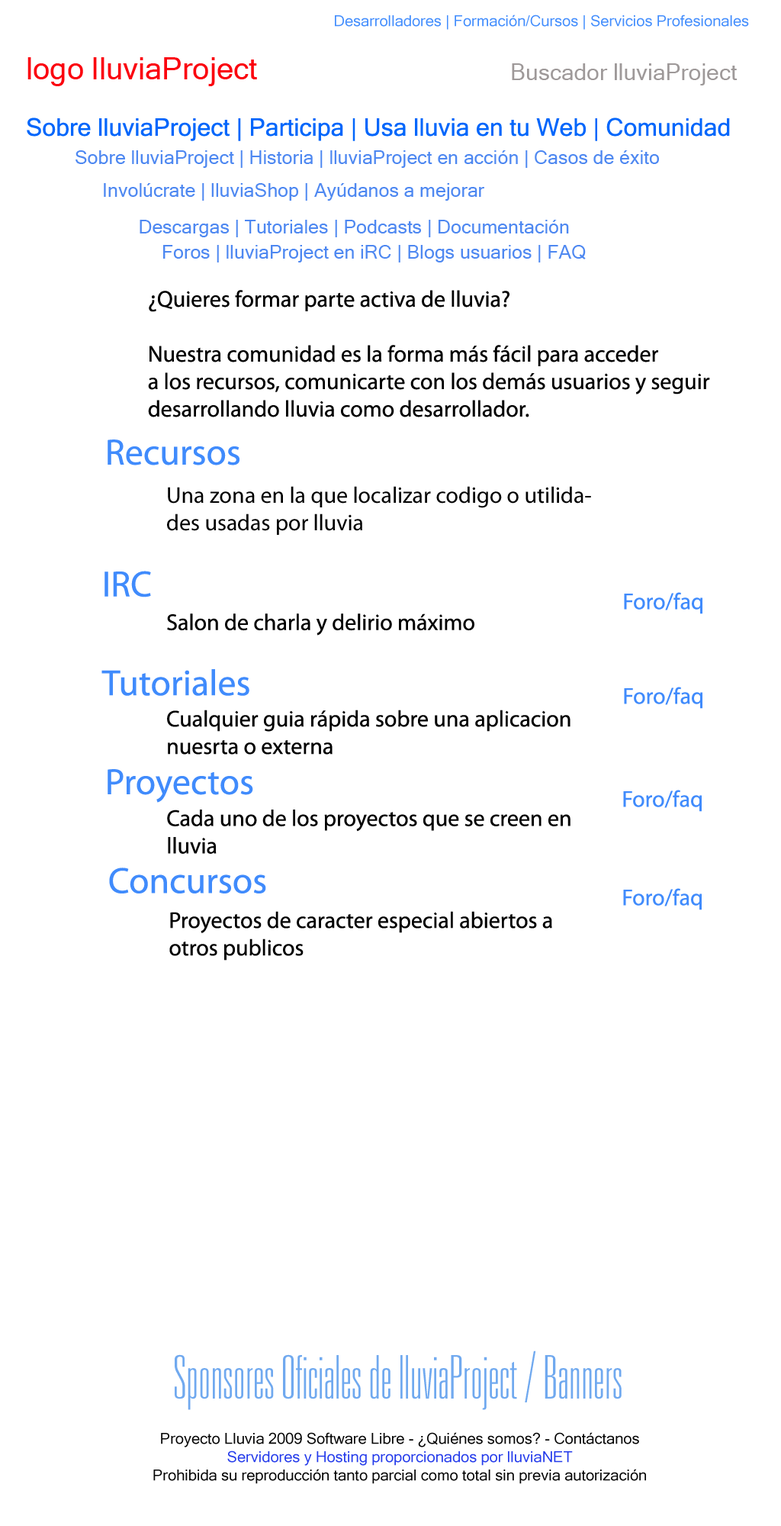
<style>
.page{position:relative;width:781px;height:1526px;background:#ffffff}
.page>*{position:absolute;margin:0}
.t1{font:15.3px "MicrosoftSansSerif";color:#428dfd}
.t2{font:30.5px "MicrosoftSansSerif";color:#fb020e}
.t3{font:22.9px "MicrosoftSansSerif";color:#9e9999}
.t4{font:24.4px "MicrosoftSansSerif";color:#0266fb}
.t5{font:19.1px "MicrosoftSansSerif";color:#4e88f1}
.t6{font:22.9px "MyriadPro-Regular";color:#000000}
.t7{font:36.6px "MyriadPro-Regular";color:#408bfc}
.t8{font:60.3px "Univers-ThinUltraCondensed";color:#70a9ef}
.t9{font:15.3px "MicrosoftSansSerif";color:#040404}
.t10{font:15.3px "MicrosoftSansSerif";color:#253ceb}
</style>
<div class="page">
<p class="t1" style="left:335px;top:14px;width:414px;height:16px">Desarrolladores | Formación/Cursos | Servicios Profesionales</p>
<p class="t2" style="left:27px;top:57px;width:230px;height:29px">logo lluviaProject</p>
<p class="t3" style="left:512px;top:63px;width:226px;height:22px">Buscador lluviaProject</p>
<p class="t4" style="left:27px;top:118px;width:703px;height:23px">Sobre lluviaProject | Participa | Usa lluvia en tu Web | Comunidad</p>
<p class="t5" style="left:76px;top:150px;width:583px;height:18px">Sobre lluviaProject | Historia | lluviaProject en acción | Casos de éxito</p>
<p class="t5" style="left:104px;top:183px;width:381px;height:18px">Involúcrate | lluviaShop | Ayúdanos a mejorar</p>
<p class="t5" style="left:140px;top:220px;width:429px;height:17px">Descargas | Tutoriales | Podcasts | Documentación</p>
<p class="t5" style="left:163px;top:245px;width:423px;height:17px">Foros | lluviaProject en iRC | Blogs usuarios | FAQ</p>
<p class="t6" style="left:148px;top:290px;width:562px;height:127px">¿Quieres formar parte activa de lluvia?<br><br>Nuestra comunidad es la forma más fácil para acceder<br>a los recursos, comunicarte con los demás usuarios y seguir<br>desarrollando lluvia como desarrollador.</p>
<p class="t7" style="left:108px;top:440px;width:132px;height:25px">Recursos</p>
<p class="t6" style="left:167px;top:486px;width:424px;height:49px">Una zona en la que localizar codigo o utilidades usadas por lluvia</p>
<p class="t7" style="left:105px;top:571px;width:46px;height:26px">IRC</p>
<p class="t6" style="left:167px;top:613px;width:308px;height:23px">Salon de charla y delirio máximo</p>
<p class="t7" style="left:101px;top:669px;width:149px;height:27px">Tutoriales<br>s</p>
<p class="t6" style="left:167px;top:710px;width:404px;height:45px">Cualquier guia rápida sobre una aplicacion nuesrta o externa</p>
<p class="t7" style="left:108px;top:769px;width:145px;height:34px">Proyectos ωω</p>
<p class="t6" style="left:167px;top:810px;width:404px;height:44px">Cada uno de los proyectos que se creen en lluvia</p>
<p class="t7" style="left:109px;top:868px;width:157px;height:26px">Concursos</p>
<p class="t6" style="left:169px;top:911px;width:383px;height:50px">Proyectos de caracter especial abiertos a otros publicos</p>
<p class="t8" style="left:175px;top:1351px;width:447px;height:59px">Sponsores Oficiales de lluviaProject / Banners</p>
<p class="t9" style="left:153px;top:1432px;width:493px;height:52px;text-align:center">Proyecto Lluvia 2009 Software Libre - ¿Quiénes somos? - Contáctanos<br><span class="t10">Servidores y Hosting proporcionados por lluviaNET<br></span>Prohibida su reproducción tanto parcial como total sin previa autorización</p>
</div>
